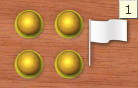
<style>
.page{position:relative;width:138px;height:88px}
.page>*{position:absolute;margin:0}
.t1{font:12px "Verdana";color:#2d2d2d;text-transform:uppercase}
</style>
<div class="page">
<p class="t1" style="left:126px;top:5px;width:5px;height:9px">1</p>
</div>
